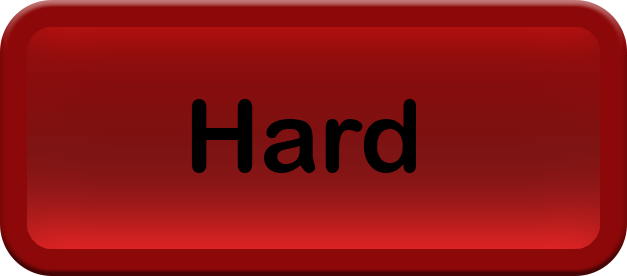
<style>
.page{position:relative;width:627px;height:276px}
.page>*{position:absolute;margin:0}
.t1{font:100px "ArialRoundedMTBold";color:#000000}
</style>
<div class="page">
<p class="t1" style="left:191px;top:99px;width:225px;height:74px">Hard</p>
</div>
